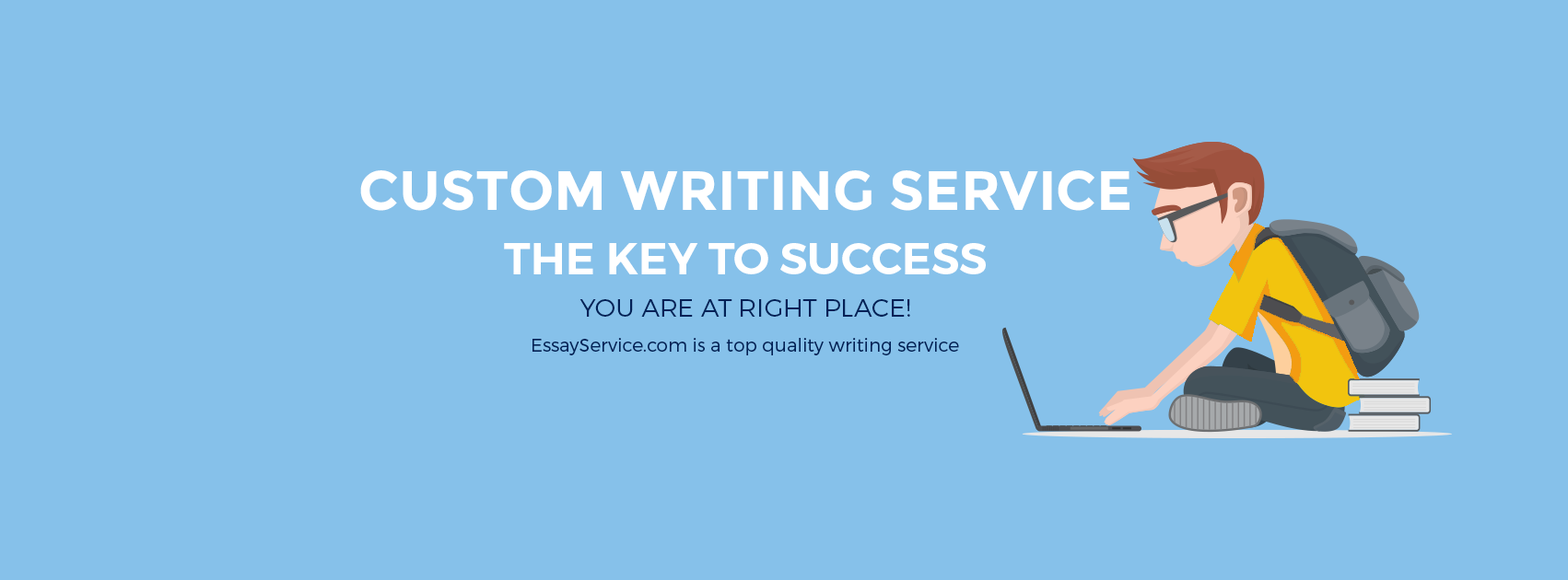
<style>
.page{position:relative;width:1568px;height:580px;background:#86c1ea}
.page>*{position:absolute;margin:0}
.t1{font:55.3px "Montserrat-Bold";color:#ffffff;text-transform:uppercase}
.t2{font:44.2px "Montserrat-SemiBold";color:#ffffff;text-transform:uppercase}
.t3{font:25.2px "Montserrat-Light";color:#002157;text-transform:uppercase}
.t4{font:18.4px "Montserrat-Light";color:#002157}
</style>
<div class="page">
<p class="t1" style="left:360px;top:170px;width:769px;height:41px">Custom Writing service</p>
<p class="t2" style="left:504px;top:243px;width:482px;height:32px">the key to success</p>
<p class="t3" style="left:579px;top:299px;width:331px;height:18px">You are at right place!</p>
<p class="t4" style="left:532px;top:338px;width:427px;height:18px">EssayService.com is a top quality writing service</p>
</div>
